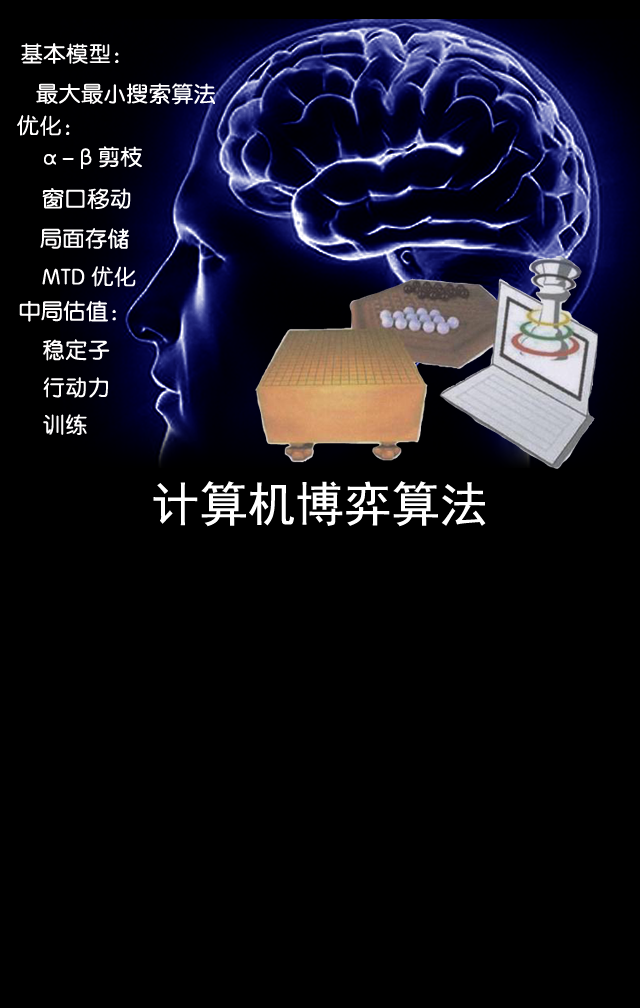
<style>
.page{position:relative;width:640px;height:1008px;background:#000000}
.page>*{position:absolute;margin:0}
.t1{font:22px "FZY3K--GBK1-0";letter-spacing:0.025em;color:#fffefe}
.t2{font:48px "SimHei";color:#ffffff}
</style>
<div class="page">
<p class="t1" style="left:21px;top:43px;width:98px;height:21px">基本模型：</p>
<p class="t1" style="left:36px;top:83px;width:179px;height:22px">最大最小搜索算法</p>
<p class="t1" style="left:17px;top:115px;width:53px;height:21px">优化：</p>
<p class="t1" style="left:44px;top:146px;width:98px;height:23px">α-β剪枝</p>
<p class="t1" style="left:42px;top:188px;width:89px;height:22px">窗口移动</p>
<p class="t1" style="left:40px;top:228px;width:90px;height:21px">局面存储</p>
<p class="t1" style="left:42px;top:266px;width:94px;height:21px">MTD 优化</p>
<p class="t1" style="left:19px;top:300px;width:97px;height:22px">中局估值：</p>
<p class="t1" style="left:43px;top:339px;width:67px;height:22px">稳定子</p>
<p class="t1" style="left:43px;top:377px;width:65px;height:21px">行动力</p>
<p class="t1" style="left:43px;top:414px;width:44px;height:21px">训练</p>
<p class="t2" style="left:153px;top:481px;width:333px;height:46px">计算机博弈算法</p>
</div>
